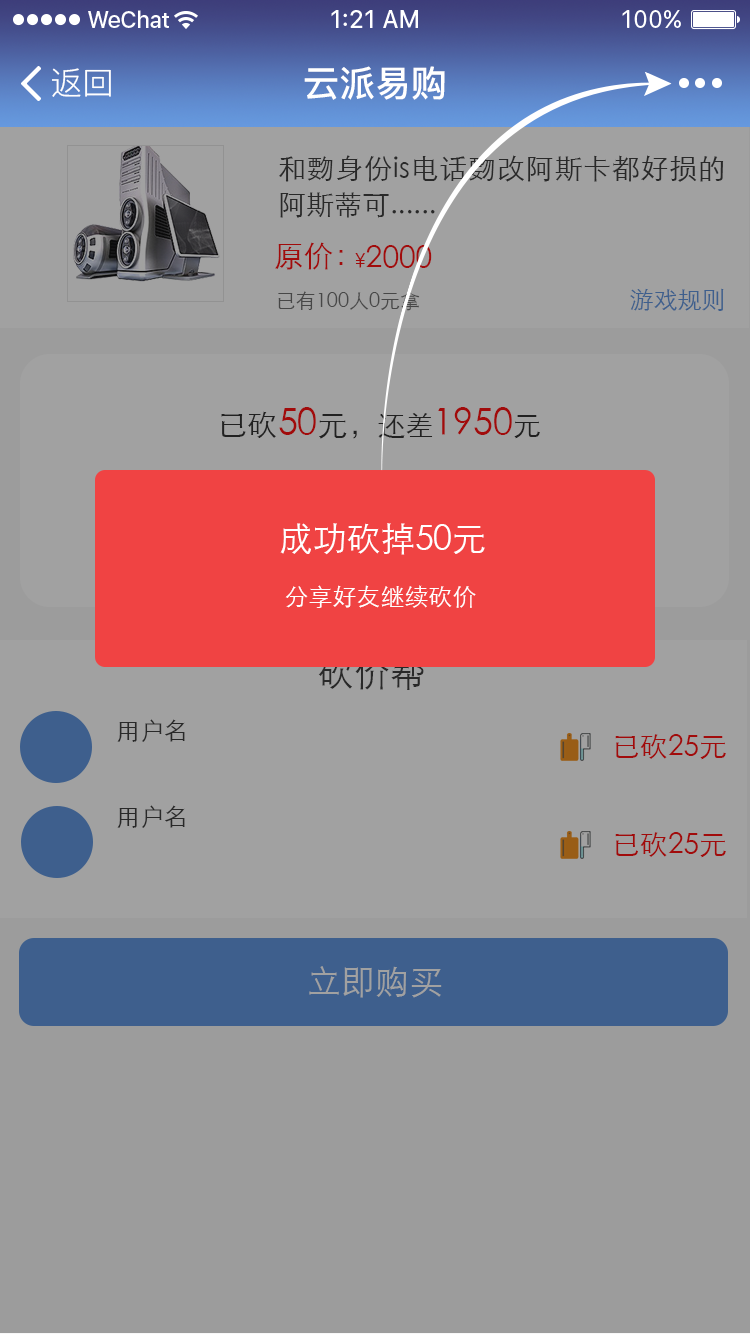
<style>
.page{position:relative;width:750px;height:1334px;background:#a1a1a1}
.page>*{position:absolute;margin:0}
.t1{font:32px "PingFang-SC-Regular";color:#ffffff}
.t2{font:36px "PingFang-SC-Bold";color:#ffffff}
.t3{font:28px/36px "STXihei";color:#333333}
.t4{font:30px "STXihei";color:#a10b0b}
.t5{font:20px "STXihei";color:#a10b0b}
.t6{font:20px "STXihei";color:#474747}
.t7{font:24px "STXihei";color:#3e5f8d}
.t8{font:36px "STXihei"}
.t9{font:30px "STXihei"}
.t10{font:28px "STXihei"}
.t11{font:34px "STXihei";color:#ffffff}
.t12{font:24px "STXihei";color:#ffffff}
.t13{font:36px "STXihei";color:#333333}
.t14{font:24px "STXihei";color:#333333}
.t15{font:28px "STXihei";color:#a10b0b}
.t16{font:34px "STXihei";color:#a1a1a1}
</style>
<div class="page">
<p class="t1" style="left:52px;top:68px;width:59px;height:29px">返回</p>
<p class="t2" style="left:304px;top:66px;width:141px;height:34px">云派易购</p>
<p class="t3" style="left:279px;top:155px;width:445px;height:63px;text-align:justify">和覅身份is电话覅改阿斯卡都好损的阿斯蒂可......</p>
<p class="t4" style="left:275px;top:242px;width:68px;height:28px">原价：</p>
<p class="t4" style="left:355px;top:245px;width:77px;height:23px"><span class="t5">¥</span>2000</p>
<p class="t6" style="left:278px;top:291px;width:142px;height:20px">已有100人0元拿</p>
<p class="t7" style="left:630px;top:288px;width:94px;height:23px">游戏规则</p>
<p class="t8" style="left:221px;top:407px;width:319px;height:32px"><span class="t9">已砍</span>50<span class="t9">元，</span><span class="t10">还差</span>1950<span class="t10">元</span></p>
<p class="t11" style="left:280px;top:523px;width:205px;height:32px">成功砍掉50元</p>
<p class="t12" style="left:285px;top:585px;width:191px;height:23px">分享好友继续砍价</p>
<p class="t13" style="left:318px;top:656px;width:106px;height:34px">砍价帮</p>
<p class="t14" style="left:117px;top:719px;width:68px;height:23px">用户名</p>
<p class="t15" style="left:615px;top:734px;width:111px;height:26px">已砍25元</p>
<p class="t14" style="left:117px;top:805px;width:68px;height:23px">用户名</p>
<p class="t15" style="left:615px;top:832px;width:111px;height:26px">已砍25元</p>
<p class="t16" style="left:309px;top:966px;width:133px;height:32px">立即购买</p>
</div>
